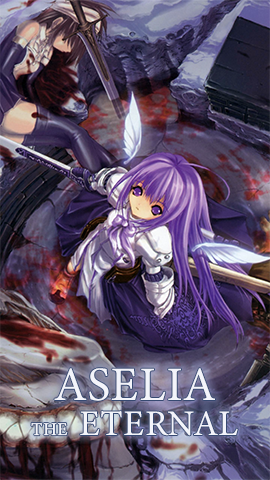
<style>
.page{position:relative;width:270px;height:480px}
.page>*{position:absolute;margin:0}
.t1{font:48px "MinionVariableConcept-Roman";color:#f3f4fa}
.t2{font:36px "MinionVariableConcept-Roman";color:#f3f4fa}
.t3{font:18px "MinionVariableConcept-Roman";color:#f3f4fa}
</style>
<div class="page">
<p class="t1" style="left:54px;top:368px;width:161px;height:33px">ASELIA</p>
<p class="t2" style="left:31px;top:410px;width:207px;height:26px"><span class="t3">THE </span>ETERNAL</p>
</div>
